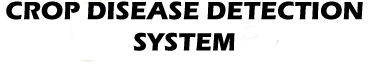
<style>
.page{position:relative;width:369px;height:72px;background:#ffffff}
.page>*{position:absolute;margin:0}
.t1{font:26px "ErasITC-Bold";color:#000000;text-transform:uppercase}
</style>
<div class="page">
<p class="t1" style="left:6px;top:1px;width:357px;height:50px;text-align:center">CROP DISEASE DETECTION SYSTEM</p>
</div>
